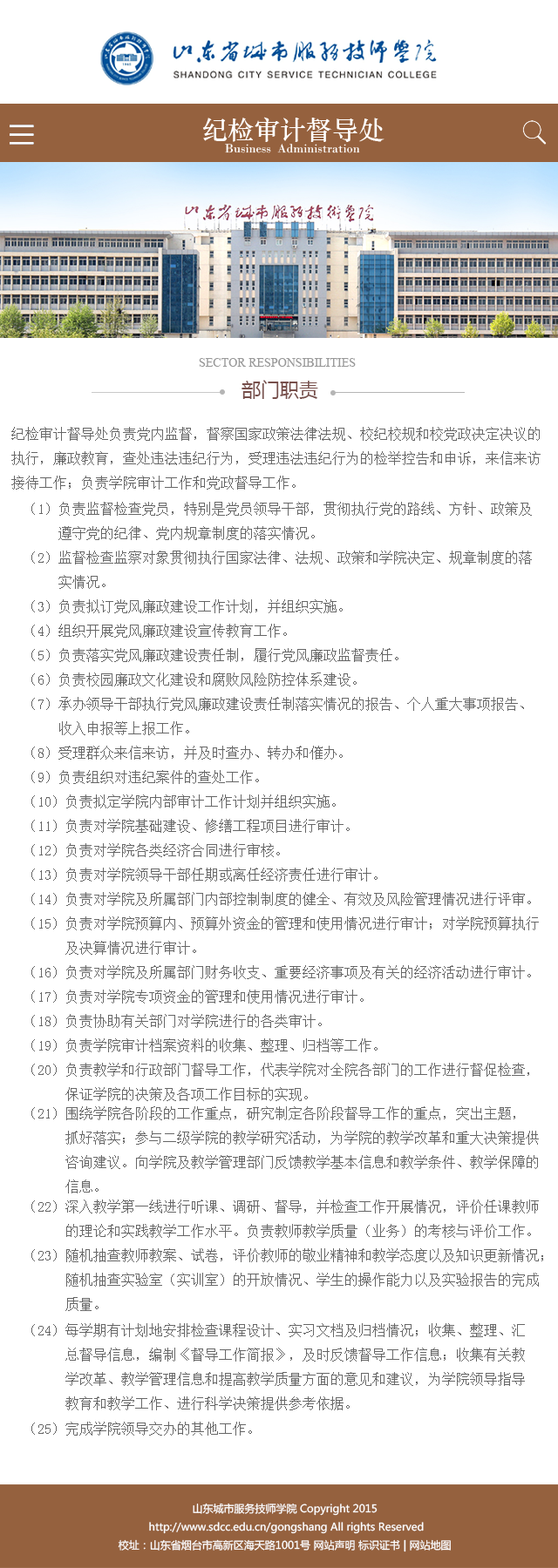
<style>
.page{position:relative;width:558px;height:1568px;background:#ffffff}
.page>*{position:absolute;margin:0}
.t1{font:26.1px "STZhongsong";color:#ffffff}
.t2{font:12.8px "BodoniMT";color:#ffffff}
.t3{font:12.2px "TimesNewRomanPSMT";color:#999999;text-transform:uppercase}
.t4{font:19.2px "MicrosoftYaHei";color:#774f4b}
.t5{font:13.9px "SimSun";color:#666666}
.t6{font:13.9px/24.4px "SimSun";color:#666666}
.t7{font:10.5px "MicrosoftYaHei";color:#ffffff}
</style>
<div class="page">
<p class="t1" style="left:202px;top:117px;width:182px;height:25px">纪检审计督导处</p>
<p class="t2" style="left:225px;top:144px;width:135px;height:9px">Business  Administration  School</p>
<p class="t3" style="left:199px;top:358px;width:156px;height:9px">Sector Responsibilities</p>
<p class="t4" style="left:241px;top:380px;width:77px;height:19px">部门职责</p>
<p class="t5" style="left:11px;top:427px;width:529px;height:63px">纪检审计督导处负责党内监督，督察国家政策法律法规、校纪校规和校党政决定决议的<br>执行，廉政教育，查处违法违纪行为，受理违法违纪行为的检举控告和申诉，来信来访<br>接待工作；负责学院审计工作和党政督导工作。</p>
<p class="t6" style="left:31px;top:502px;width:507px;height:599px">（1）负责监督检查党员，特别是党员领导干部，贯彻执行党的路线、方针、政策及<br>     遵守党的纪律、党内规章制度的落实情况。<br>（2）监督检查监察对象贯彻执行国家法律、法规、政策和学院决定、规章制度的落<br>     实情况。<br>（3）负责拟订党风廉政建设工作计划，并组织实施。<br>（4）组织开展党风廉政建设宣传教育工作。<br>（5）负责落实党风廉政建设责任制，履行党风廉政监督责任。<br>（6）负责校园廉政文化建设和腐败风险防控体系建设。<br>（7）承办领导干部执行党风廉政建设责任制落实情况的报告、个人重大事项报告、<br>     收入申报等上报工作。<br>（8）受理群众来信来访，并及时查办、转办和催办。<br>（9）负责组织对违纪案件的查处工作。<br>（10）负责拟定学院内部审计工作计划并组织实施。<br>（11）负责对学院基础建设、修缮工程项目进行审计。<br>（12）负责对学院各类经济合同进行审核。<br>（13）负责对学院领导干部任期或离任经济责任进行审计。<br>（14）负责对学院及所属部门内部控制制度的健全、有效及风险管理情况进行评审。<br>（15）负责对学院预算内、预算外资金的管理和使用情况进行审计；对学院预算执行<br>      及决算情况进行审计。<br>（16）负责对学院及所属部门财务收支、重要经济事项及有关的经济活动进行审计。<br>（17）负责对学院专项资金的管理和使用情况进行审计。<br>（18）负责协助有关部门对学院进行的各类审计。<br>（19）负责学院审计档案资料的收集、整理、归档等工作。<br>（20）负责教学和行政部门督导工作，代表学院对全院各部门的工作进行督促检查，<br>      保证学院的决策及各项工作目标的实现。</p>
<p class="t6" style="left:31px;top:1106px;width:507px;height:87px">（21）围绕学院各阶段的工作重点，研究制定各阶段督导工作的重点，突出主题，<br>          抓好落实；参与二级学院的教学研究活动，为学院的教学改革和重大决策提供<br>          咨询建议。向学院及教学管理部门反馈教学基本信息和教学条件、教学保障的<br>          信息。</p>
<p class="t6" style="left:31px;top:1200px;width:507px;height:38px">（22）深入教学第一线进行听课、调研、督导，并检查工作开展情况，评价任课教师<br>      的理论和实践教学工作水平。负责教师教学质量（业务）的考核与评价工作。</p>
<p class="t6" style="left:31px;top:1248px;width:512px;height:63px">（23）随机抽查教师教案、试卷，评价教师的敬业精神和教学态度以及知识更新情况；<br>      随机抽查实验室（实训室）的开放情况、学生的操作能力以及实验报告的完成<br>      质量。</p>
<p class="t6" style="left:31px;top:1323px;width:493px;height:87px">（24）每学期有计划地安排检查课程设计、实习文档及归档情况；收集、整理、汇<br>         总督导信息，编制《督导工作简报》，及时反馈督导工作信息；收集有关教<br>         学改革、教学管理信息和提高教学质量方面的意见和建议，为学院领导指导<br>         教育和教学工作、进行科学决策提供参考依据。</p>
<p class="t5" style="left:31px;top:1422px;width:221px;height:14px">（25）完成学院领导交办的其他工作。</p>
<p class="t7" style="left:118px;top:1503px;width:332px;height:49px;text-align:center">山东城市服务技师学院 Copyright 2015<br> http://www.sdcc.edu.cn/gongshang All rights Reserved<br>校址：山东省烟台市高新区海天路1001号 网站声明 标识证书 | 网站地图</p>
</div>
